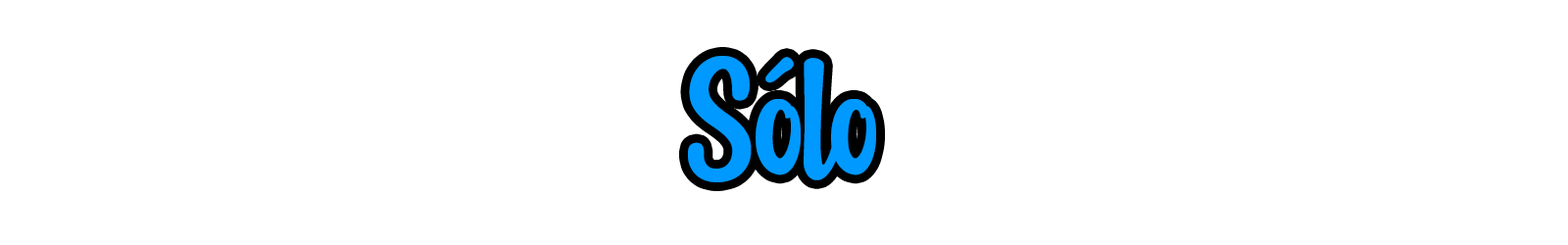
<style>
.page{position:relative;width:1568px;height:245px;background:#ffffff}
.page>*{position:absolute;margin:0}
.t1{font:180.8px "MangoDrink-Regular";color:#0099ff}
</style>
<div class="page">
<p class="t1" style="left:688px;top:56px;width:188px;height:126px">Sólo</p>
</div>
